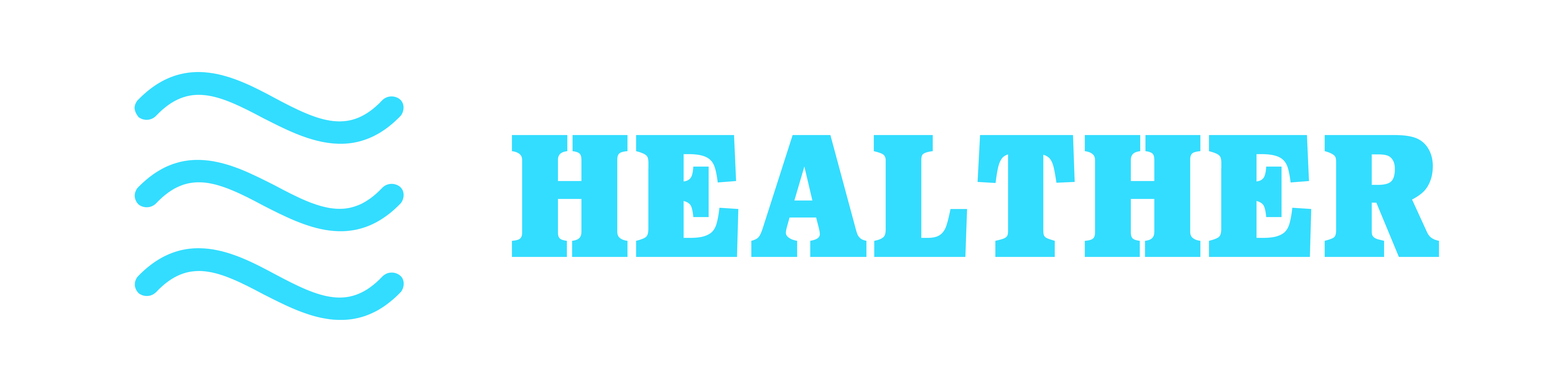
<style>
.page{position:relative;width:1568px;height:392px;background:#ffffff}
.page>*{position:absolute;margin:0}
.t1{font:183.1px "Forbes-Bold";color:#33ddff}
</style>
<div class="page">
<p class="t1" style="left:512px;top:135px;width:927px;height:122px">HEALTHER</p>
</div>
